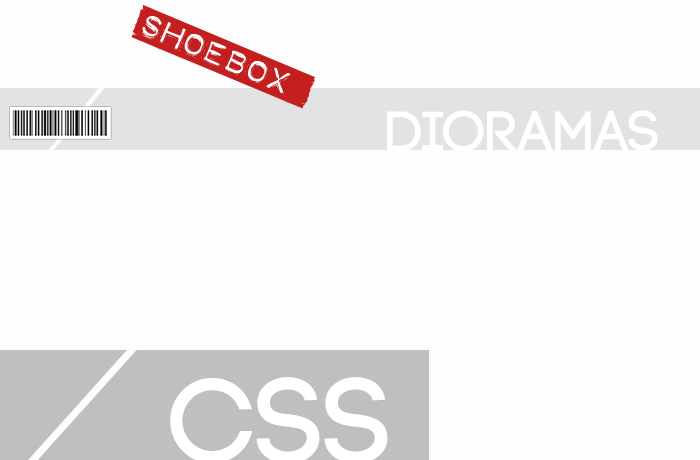
<style>
.page{position:relative;width:700px;height:460px;background:#fdfdfd}
.page>*{position:absolute;margin:0}
.t1{font:24.3px "DymoFontInvers";color:#c31f1f}
.t2{font:57.4px "Code-Bold";color:#ffffff}
</style>
<div class="page">
<p class="t1" style="left:137px;top:11px;width:157px;height:85px;rotate:23deg">SHOEBOX</p>
<p class="t2" style="left:387px;top:110px;width:271px;height:42px">Dioramas</p>
</div>
